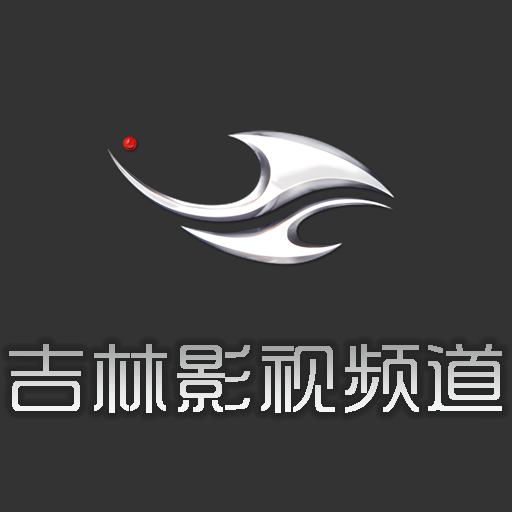
<style>
.page{position:relative;width:512px;height:512px;background:#333333}
.page>*{position:absolute;margin:0}
.t1{font:80px "SJshishang-Regular";letter-spacing:0.02em;font-weight:bold}
</style>
<div class="page">
<p class="t1" style="left:9px;top:344px;width:493px;height:69px">吉林影视频道</p>
</div>
